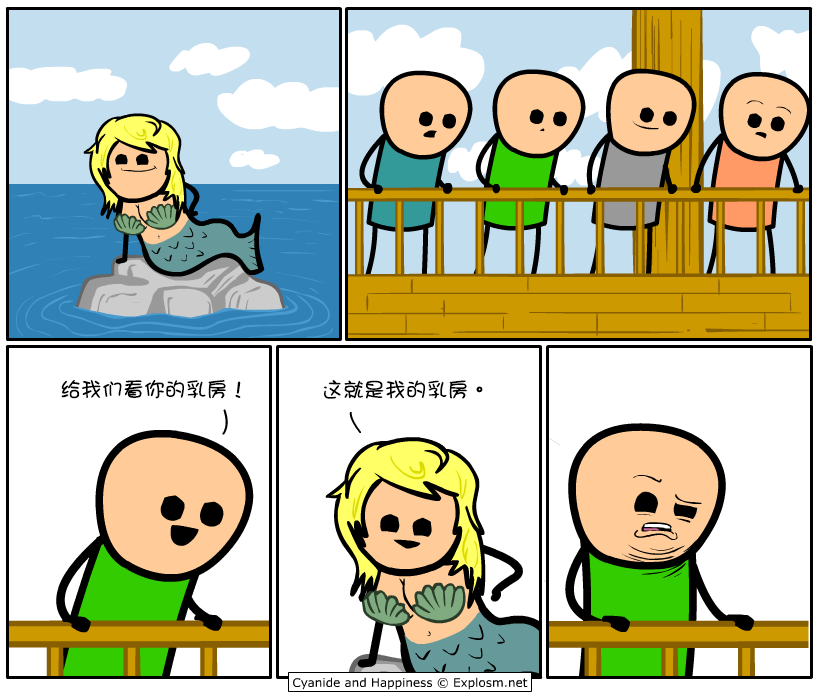
<style>
.page{position:relative;width:820px;height:700px;background:#ffffff}
.page>*{position:absolute;margin:0}
.t1{font:21px "DFGirl";color:#000000}
</style>
<div class="page">
<p class="t1" style="left:61px;top:379px;width:180px;height:20px">给我们看你的乳房！</p>
<p class="t1" style="left:323px;top:380px;width:160px;height:19px">这就是我的乳房。</p>
</div>
